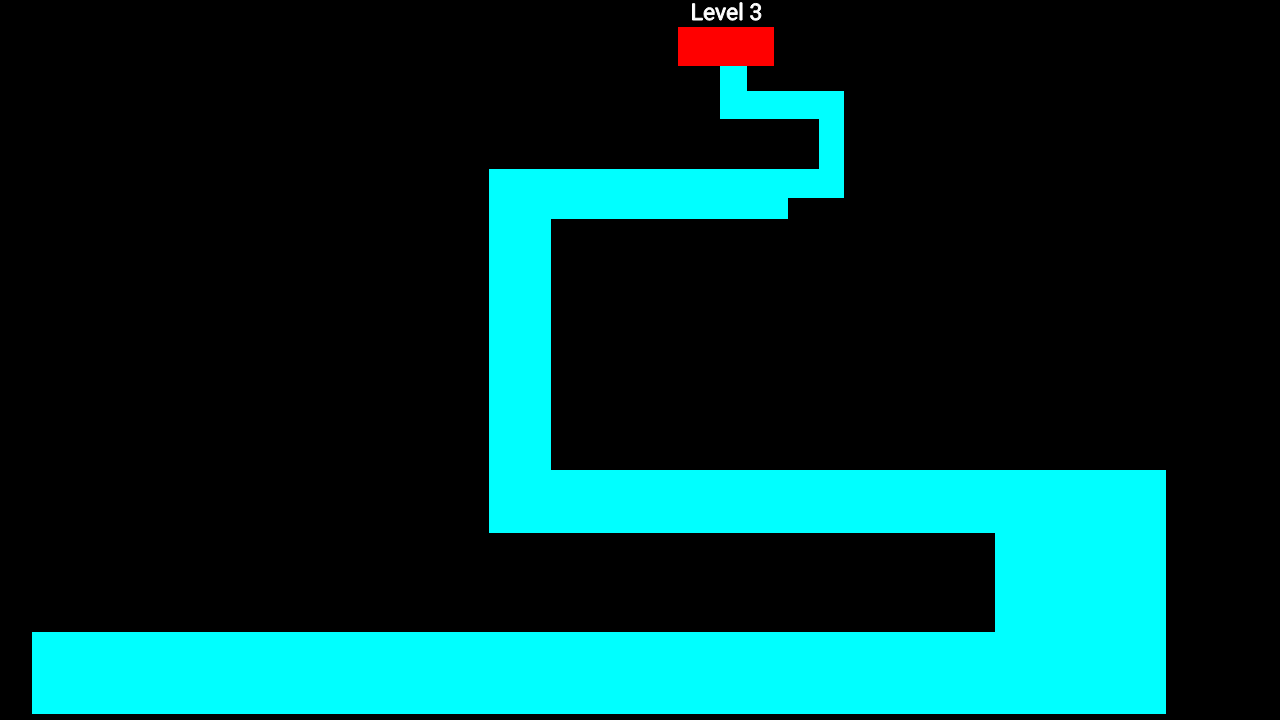
<style>
.page{position:relative;width:1280px;height:720px;background:#000000}
.page>*{position:absolute;margin:0}
.t1{font:23px "Roboto-Regular";color:#ffffff}
</style>
<div class="page">
<p class="t1" style="left:691px;top:1px;width:71px;height:21px">Level 3</p>
</div>
